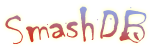
<style>
.page{position:relative;width:150px;height:50px;background:#ffffff}
.page>*{position:absolute;margin:0}
.t1{font:48px "Chiller-Regular"}
</style>
<div class="page">
<p class="t1" style="left:5px;top:6px;width:142px;height:39px">SmashDB</p>
</div>
